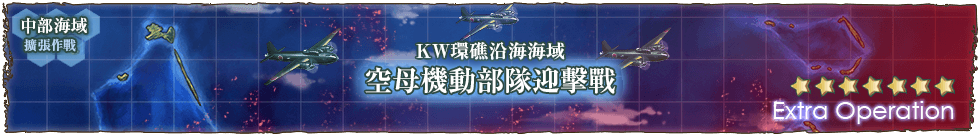
<style>
.page{position:relative;width:980px;height:136px}
.page>*{position:absolute;margin:0}
.t1{font:17px/22px "RyuminPr6N-ExBold";color:#ffffff}
.t2{font:13px/22px "RyuminPr6N-ExBold";color:#b9d7f5}
.t3{font:19px "RyuminPro-ExBold";color:#ffffff}
.t4{font:28px "RyuminPro-ExBold";color:#ffffff}
</style>
<div class="page">
<p class="t1" style="left:21px;top:17px;width:66px;height:35px">中部海域<br>  <span class="t2">擴張作戰</span></p>
<p class="t3" style="left:416px;top:42px;width:149px;height:18px">KW環礁沿海海域</p>
<p class="t4" style="left:365px;top:67px;width:251px;height:27px">空母機動部隊迎擊戰</p>
</div>
